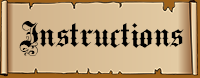
<style>
.page{position:relative;width:200px;height:78px}
.page>*{position:absolute;margin:0}
.t1{font:36.2px "MediciText";color:#000000}
</style>
<div class="page">
<p class="t1" style="left:19px;top:21px;width:165px;height:35px">Instructions</p>
</div>
